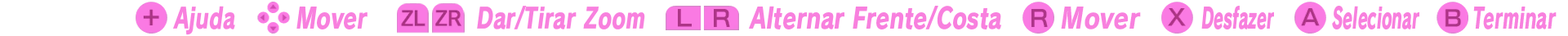
<style>
.page{position:relative;width:1568px;height:36px;background:#ffffff}
.page>*{position:absolute;margin:0}
.t1{font:28.3px "RodinPro-EB";color:#f880de;font-style:italic;scale:0.71 1}
.t2{font:28.3px "RodinPro-EB";color:#f880de;font-style:italic;scale:0.74 1}
.t3{font:28.3px "RodinPro-EB";color:#f880de;font-style:italic;scale:0.78 1}
.t4{font:28.3px "RodinPro-EB";color:#f880de;font-style:italic;scale:0.56 1}
.t5{font:28.3px "RodinPro-EB";color:#f880de;font-style:italic;scale:0.55 1}
.t6{font:28.3px "RodinPro-EB";color:#f880de;font-style:italic;scale:0.77 1}
.t7{font:28.3px "RodinPro-EB";color:#f880de;font-style:italic;scale:0.86 1}
.t8{font:28.3px "RodinPro-EB";color:#f880de;font-style:italic;scale:0.63 1}
</style>
<div class="page">
<p class="t1" style="left:173px;top:6px;width:62px;height:29px">Ajuda</p>
<p class="t2" style="left:477px;top:6px;width:168px;height:23px">Dar/Tirar Zoom</p>
<p class="t3" style="left:749px;top:6px;width:253px;height:23px">Alternar Frente/Costa</p>
<p class="t4" style="left:1201px;top:6px;width:73px;height:23px">Desfazer</p>
<p class="t5" style="left:1332px;top:6px;width:87px;height:23px">Selecionar</p>
<p class="t6" style="left:296px;top:7px;width:72px;height:22px">Mover</p>
<p class="t7" style="left:1061px;top:7px;width:80px;height:22px">Mover</p>
<p class="t8" style="left:1473px;top:7px;width:84px;height:22px">Terminar</p>
</div>
